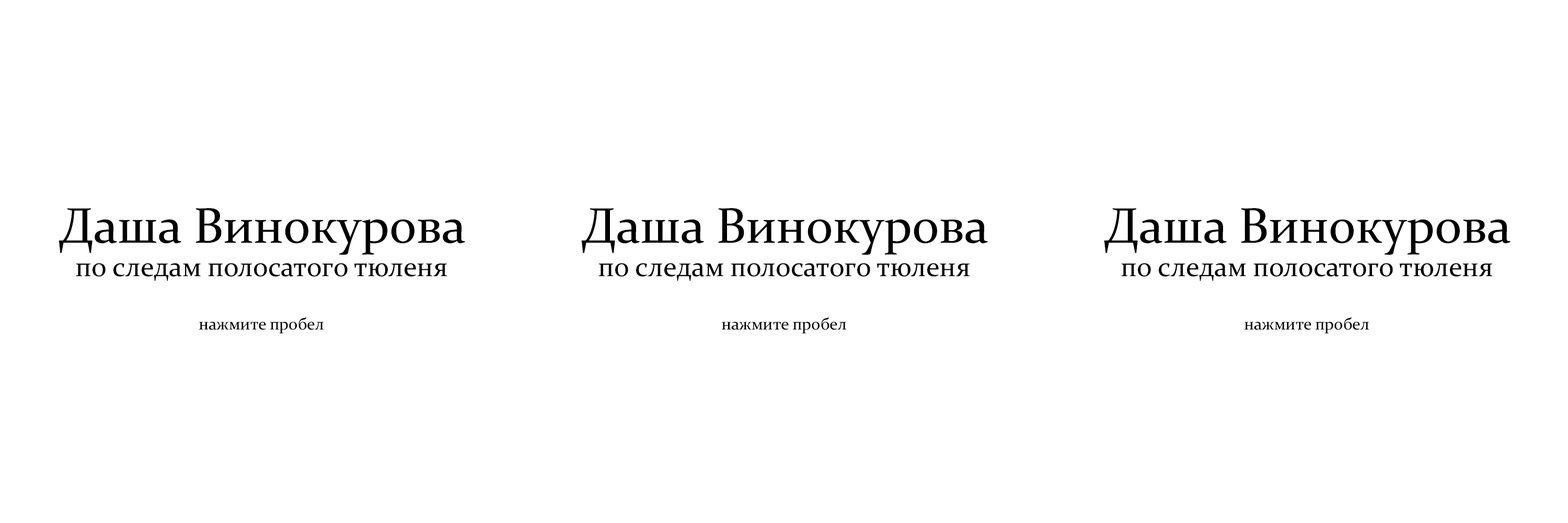
<style>
.page{position:relative;width:1568px;height:523px;background:#ffffff}
.page>*{position:absolute;margin:0}
.t1{font:27.9px "Constantia";color:#000000}
.t2{font:50.2px "Constantia";color:#000000}
.t3{font:16.7px "Constantia";color:#000000}
</style>
<div class="page">
<p class="t1" style="left:59px;top:208px;width:406px;height:73px;text-align:center"><span class="t2">Даша Винокурова<br></span>по следам полосатого тюленя</p>
<p class="t1" style="left:581px;top:208px;width:407px;height:73px;text-align:center"><span class="t2">Даша Винокурова<br></span>по следам полосатого тюленя</p>
<p class="t1" style="left:1104px;top:208px;width:407px;height:73px;text-align:center"><span class="t2">Даша Винокурова<br></span>по следам полосатого тюленя</p>
<p class="t3" style="left:199px;top:317px;width:125px;height:16px">нажмите пробел</p>
<p class="t3" style="left:722px;top:317px;width:124px;height:16px">нажмите пробел</p>
<p class="t3" style="left:1244px;top:317px;width:125px;height:16px">нажмите пробел</p>
</div>
